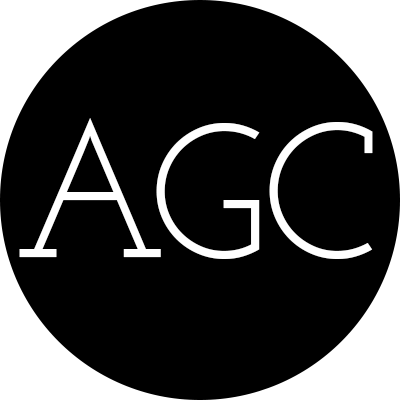
<style>
.page{position:relative;width:400px;height:400px;background:#000000}
.page>*{position:absolute;margin:0}
.t1{font:190.4px "JosefinSlab";color:#ffffff}
</style>
<div class="page">
<p class="t1" style="left:19px;top:118px;width:354px;height:141px">AGC</p>
</div>
